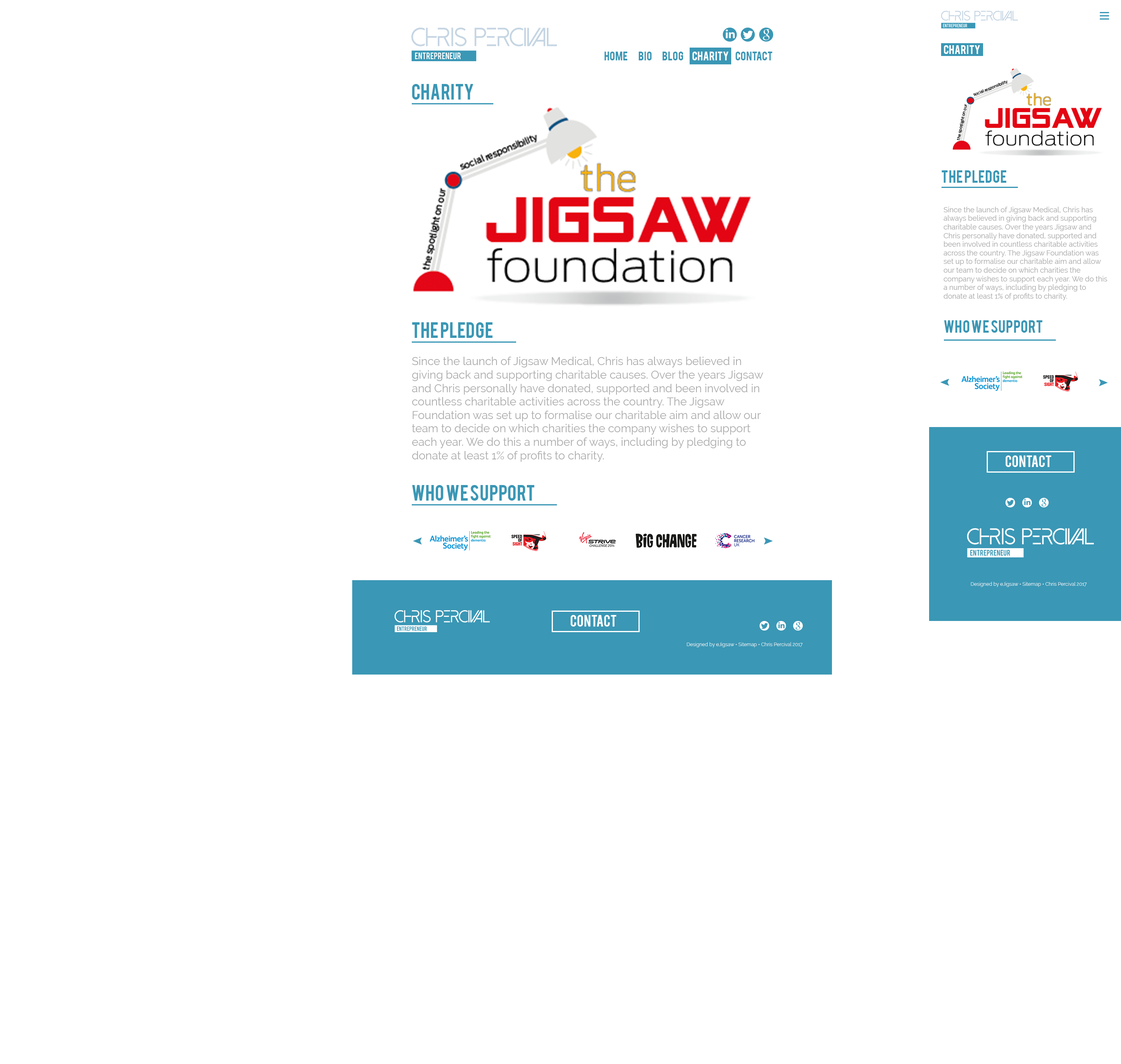
<style>
.page{position:relative;width:1121px;height:1064px;background:#ffffff}
.page>*{position:absolute;margin:0}
.t1{font:10.2px "Bebas";color:#3a97b5}
.t2{font:10.2px "Bebas";color:#ffffff}
.t3{font:17.4px "Bebas";color:#3a97b5}
.t4{font:14px "Bebas";color:#3a97b5}
.t5{font:7.2px "Raleway-Regular";color:#aaaaaa}
.t6{font:11.2px "Raleway-Regular";color:#aaaaaa}
.t7{font:12.6px "Bebas";color:#ffffff}
.t8{font:4.9px "Raleway-Light";color:#ffffff}
</style>
<div class="page">
<p class="t1" style="left:604px;top:52px;width:24px;height:8px">home</p>
<p class="t1" style="left:638px;top:52px;width:14px;height:8px">bio</p>
<p class="t1" style="left:662px;top:52px;width:21px;height:8px">Blog</p>
<p class="t2" style="left:692px;top:52px;width:36px;height:8px">charity</p>
<p class="t1" style="left:736px;top:52px;width:36px;height:8px">contact</p>
<p class="t2" style="left:944px;top:45px;width:36px;height:9px">charity</p>
<p class="t3" style="left:412px;top:84px;width:61px;height:16px">charity</p>
<p class="t4" style="left:941px;top:170px;width:65px;height:13px">the pledge</p>
<p class="t5" style="left:943px;top:207px;width:164px;height:93px">Since the launch of Jigsaw Medical, Chris has always believed in giving back and supporting charitable causes. Over the years Jigsaw and Chris personally have donated, supported and been involved in countless charitable activities across the country. The Jigsaw Foundation was set up to formalise our charitable aim and allow our team to decide on which charities the company wishes to support each year. We do this a number of ways, including by pledging to donate at least 1% of profits to charity.</p>
<p class="t3" style="left:412px;top:322px;width:81px;height:16px">the pledge</p>
<p class="t4" style="left:944px;top:320px;width:99px;height:13px">who we support</p>
<p class="t6" style="left:412px;top:357px;width:351px;height:105px">Since the launch of Jigsaw Medical, Chris has always believed in giving back and supporting charitable causes. Over the years Jigsaw and Chris personally have donated, supported and been involved in countless charitable activities across the country. The Jigsaw Foundation was set up to formalise our charitable aim and allow our team to decide on which charities the company wishes to support each year. We do this a number of ways, including by pledging to donate at least 1% of profits to charity.</p>
<p class="t7" style="left:1005px;top:455px;width:46px;height:12px">contact</p>
<p class="t3" style="left:412px;top:485px;width:122px;height:16px">who we support</p>
<p class="t8" style="left:971px;top:582px;width:116px;height:5px">Designed by eJigsaw • Sitemap • Chris Percival 2017</p>
<p class="t7" style="left:570px;top:615px;width:46px;height:11px">contact</p>
<p class="t8" style="left:687px;top:642px;width:116px;height:5px">Designed by eJigsaw • Sitemap • Chris Percival 2017</p>
</div>
